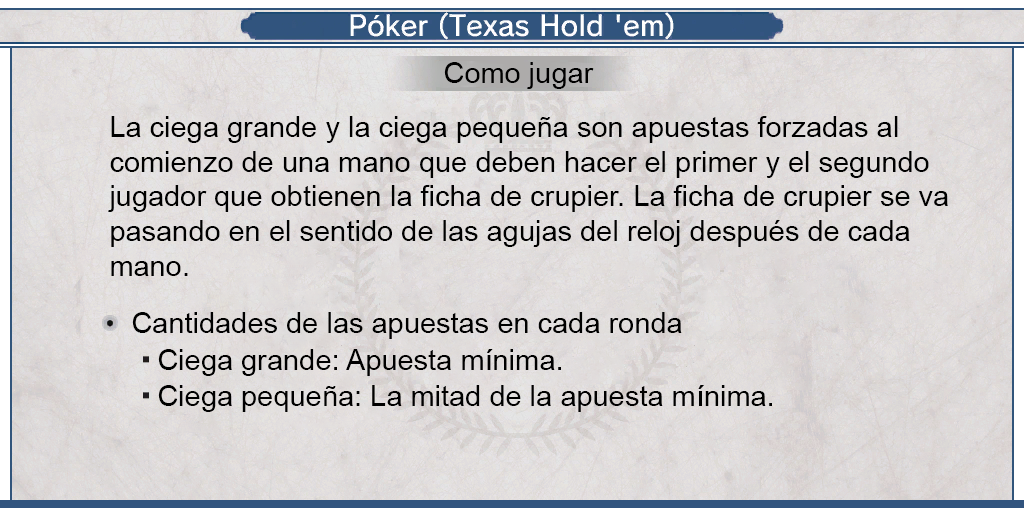
<style>
.page{position:relative;width:1024px;height:512px}
.page>*{position:absolute;margin:0}
.t1{font:29px "ArialMT";color:#000000}
</style>
<div class="page">
<p class="t1" style="left:444px;top:62px;width:150px;height:27px">Como jugar</p>
<p class="t1" style="left:108px;top:116px;width:840px;height:160px">La ciega grande y la ciega pequeña son apuestas forzadas al <br>comienzo de una mano que deben hacer el primer y el segundo <br>jugador que obtienen la ficha de crupier. La ficha de crupier se va <br>pasando en el sentido de las agujas del reloj después de cada <br>mano.</p>
<p class="t1" style="left:132px;top:312px;width:550px;height:27px">Cantidades de las apuestas en cada ronda</p>
<p class="t1" style="left:158px;top:349px;width:403px;height:27px">Ciega grande: Apuesta mínima.</p>
<p class="t1" style="left:158px;top:385px;width:614px;height:27px">Ciega pequeña: La mitad de la apuesta mínima.</p>
</div>
